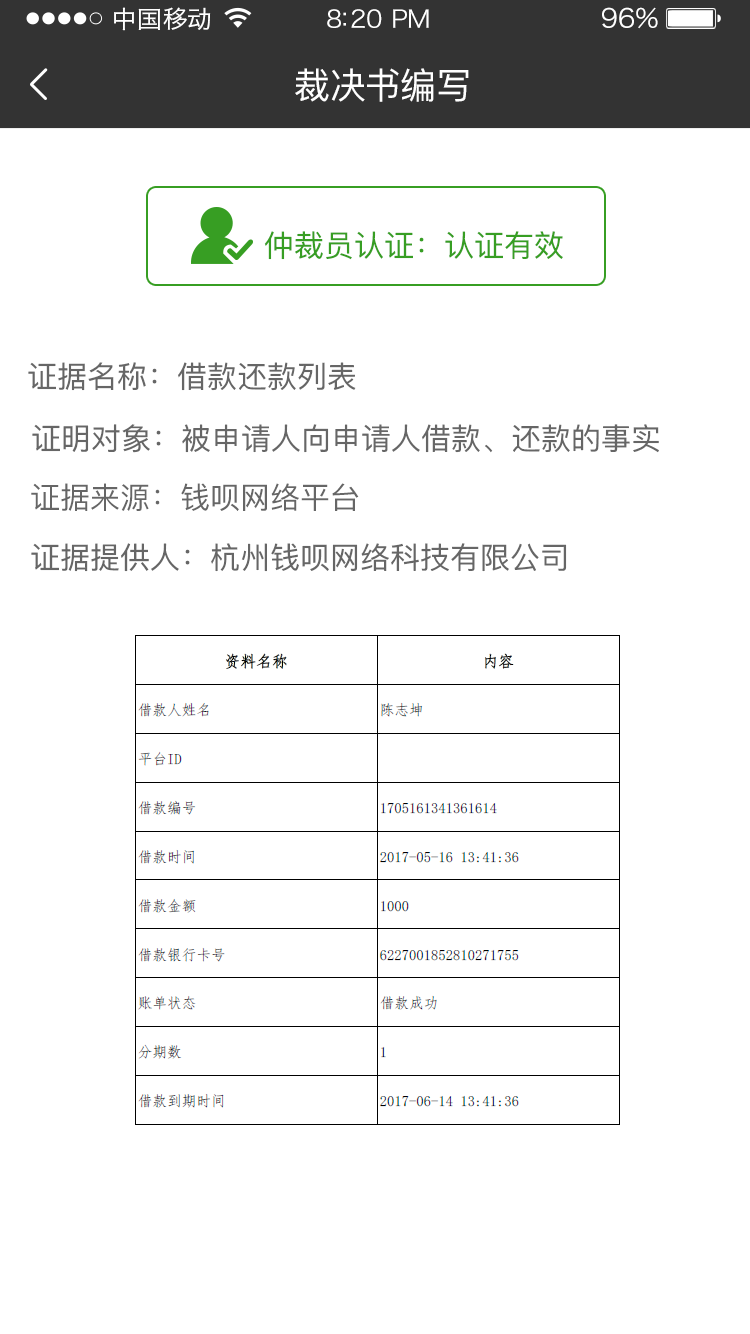
<style>
.page{position:relative;width:750px;height:1334px;background:#ffffff}
.page>*{position:absolute;margin:0}
.t1{font:24px "HiraginoSansGB-W3";letter-spacing:0.02em;color:#ffffff;scale:1.03 1}
.t2{font:24px "HiraginoSansGB-W3";letter-spacing:-0.02em;color:#ffffff;scale:1.03 1}
.t3{font:26.2px "HiraginoSansGB-W3";letter-spacing:-0.02em;color:#ffffff;scale:1.03 1}
.t4{font:36px "PingFangSC-Regular";letter-spacing:-0.02em;color:#ffffff}
.t5{font:30px "PingFangSC-Regular";color:#379e23}
.t6{font:30px "PingFangSC-Regular";color:#666666}
</style>
<div class="page">
<p class="t1" style="left:114px;top:7px;width:97px;height:24px">中国移动</p>
<p class="t2" style="left:327px;top:9px;width:102px;height:19px">8:20 PM</p>
<p class="t3" style="left:602px;top:7px;width:56px;height:22px">96%</p>
<p class="t4" style="left:295px;top:68px;width:174px;height:34px">裁决书编写</p>
<p class="t5" style="left:264px;top:231px;width:299px;height:29px">仲裁员认证：认证有效</p>
<p class="t6" style="left:28px;top:362px;width:328px;height:29px">证据名称：借款还款列表</p>
<p class="t6" style="left:32px;top:424px;width:627px;height:29px">证明对象：被申请人向申请人借款、还款的事实</p>
<p class="t6" style="left:31px;top:483px;width:328px;height:28px">证据来源：钱呗网络平台</p>
<p class="t6" style="left:31px;top:543px;width:536px;height:29px">证据提供人：杭州钱呗网络科技有限公司</p>
</div>
